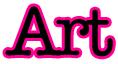
<style>
.page{position:relative;width:118px;height:64px;background:#ffffff}
.page>*{position:absolute;margin:0}
.t1{font:72px "AmerTypewriterITCbyBT-Medium";letter-spacing:-0.06em;color:#000000}
</style>
<div class="page">
<p class="t1" style="left:5px;top:6px;width:108px;height:51px">Art</p>
</div>
